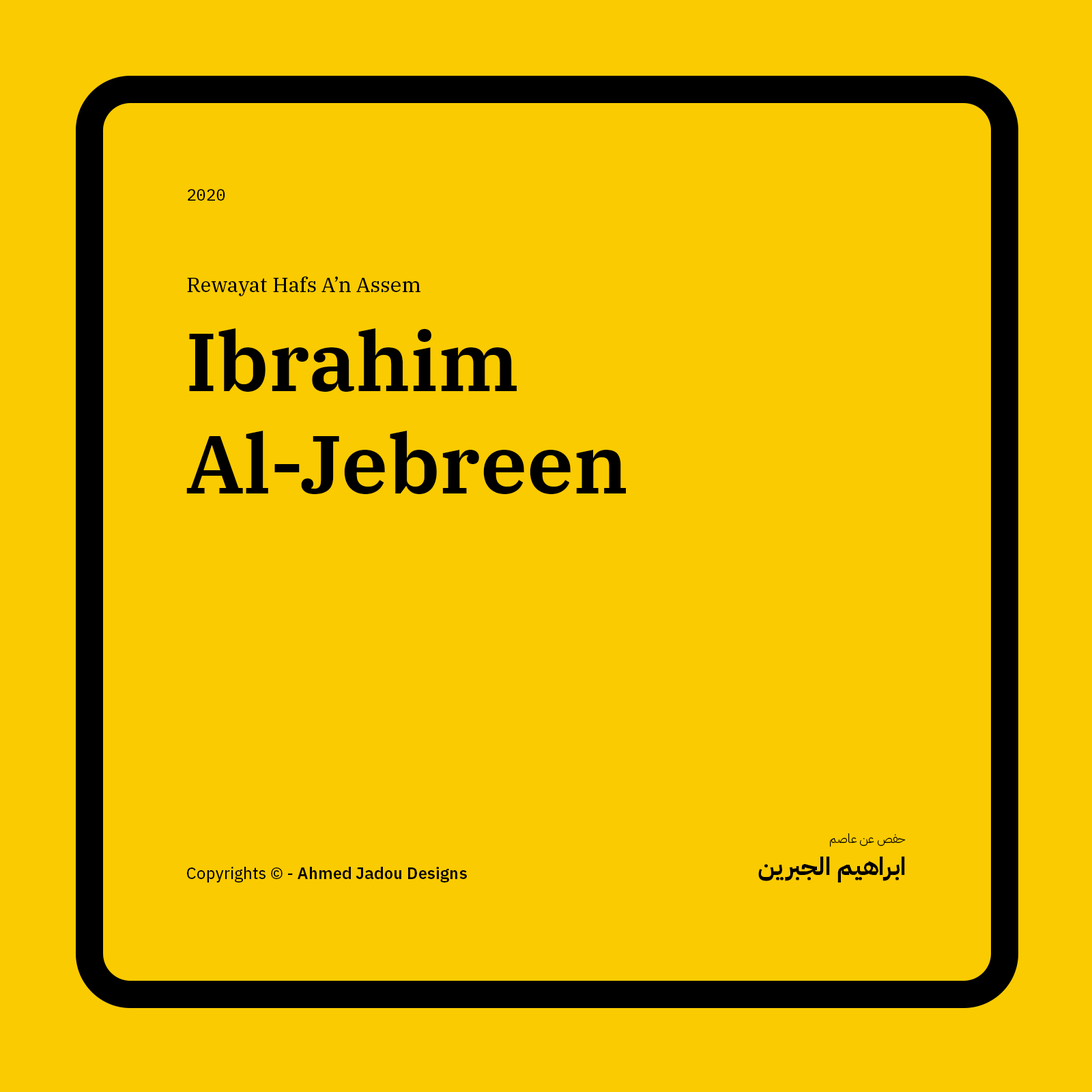
<style>
.page{position:relative;width:1092px;height:1092px;background:#facb00}
.page>*{position:absolute;margin:0}
.t1{font:16.4px "IBMPlexMono-Text";color:#000000}
.t2{font:20.5px "IBMPlexSerif-Text";color:#000000}
.t3{font:81.9px/102.7px "IBMPlexSerif-SemiBold";color:#000000}
.t4{font:12.3px "IBMPlexArabic-Light";color:#000000}
.t5{font:24.6px "IBMPlexArabic-Bold";color:#000000}
.t6{font:16.4px "IBMPlexSans-SemiBold";color:#000000}
.t7{font:16.4px "IBMPlexSans-Text";color:#000000}
</style>
<div class="page">
<p class="t1" style="left:188px;top:189px;width:37px;height:12px">2020</p>
<p class="t2" style="left:187px;top:276px;width:233px;height:20px">Rewayat Hafs A’n Assem</p>
<p class="t3" style="left:186px;top:328px;width:441px;height:166px">Ibrahim Al-Jebreen</p>
<p class="t4" style="left:830px;top:833px;width:76px;height:14px">حفص عن عاصم</p>
<p class="t5" style="left:758px;top:857px;width:147px;height:25px">ابراهيم الجبرين</p>
<p class="t6" style="left:187px;top:867px;width:280px;height:15px"><span class="t7">Copyrights © - </span>Ahmed Jadou Designs</p>
</div>
